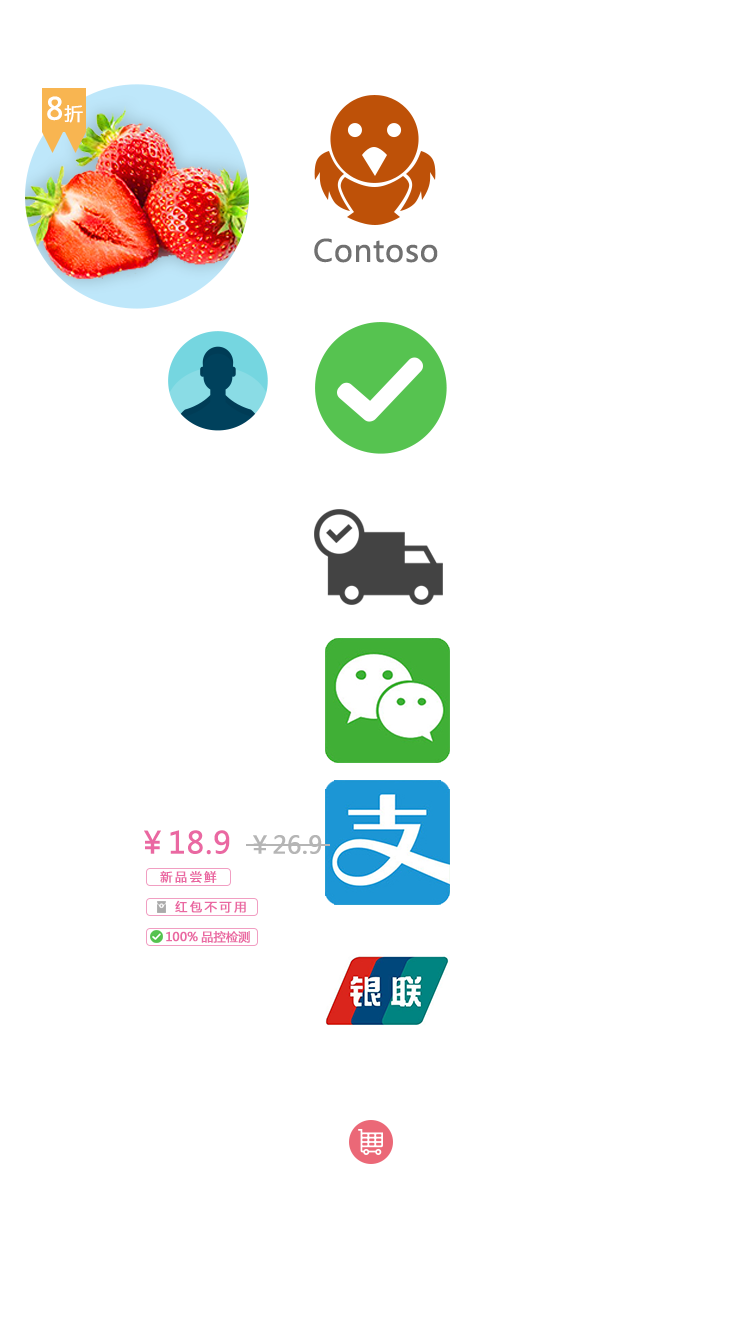
<style>
.page{position:relative;width:750px;height:1334px;background:#ffffff}
.page>*{position:absolute;margin:0}
.t1{font:30px "MicrosoftYaHei";letter-spacing:-0.15em;color:#ffffff;font-weight:bold}
.t2{font:18px "MicrosoftYaHei";letter-spacing:-0.15em;color:#ffffff;font-weight:bold}
.t3{font:30px "MicrosoftYaHei";color:#707070;font-weight:bold}
.t4{font:30px "MicrosoftYaHei";color:#ea68a2;font-weight:bold}
.t5{font:24px "MicrosoftYaHei";color:#b5b5b5;font-weight:bold}
.t6{font:12px "MicrosoftYaHei";letter-spacing:0.2em;color:#ea68a2;font-weight:bold}
.t7{font:12px "MicrosoftYaHei";color:#ea68a2;font-weight:bold}
</style>
<div class="page">
<p class="t1" style="left:47px;top:96px;width:36px;height:27px">8<span class="t2">折</span></p>
<p class="t3" style="left:314px;top:238px;width:124px;height:25px">Contoso</p>
<p class="t4" style="left:144px;top:830px;width:86px;height:25px">￥18.9</p>
<p class="t5" style="left:253px;top:835px;width:69px;height:19px">￥26.9</p>
<p class="t6" style="left:160px;top:871px;width:57px;height:12px">新品尝鲜</p>
<p class="t6" style="left:175px;top:900px;width:71px;height:13px">红包不可用</p>
<p class="t7" style="left:166px;top:931px;width:84px;height:12px">100%品控检测</p>
</div>
